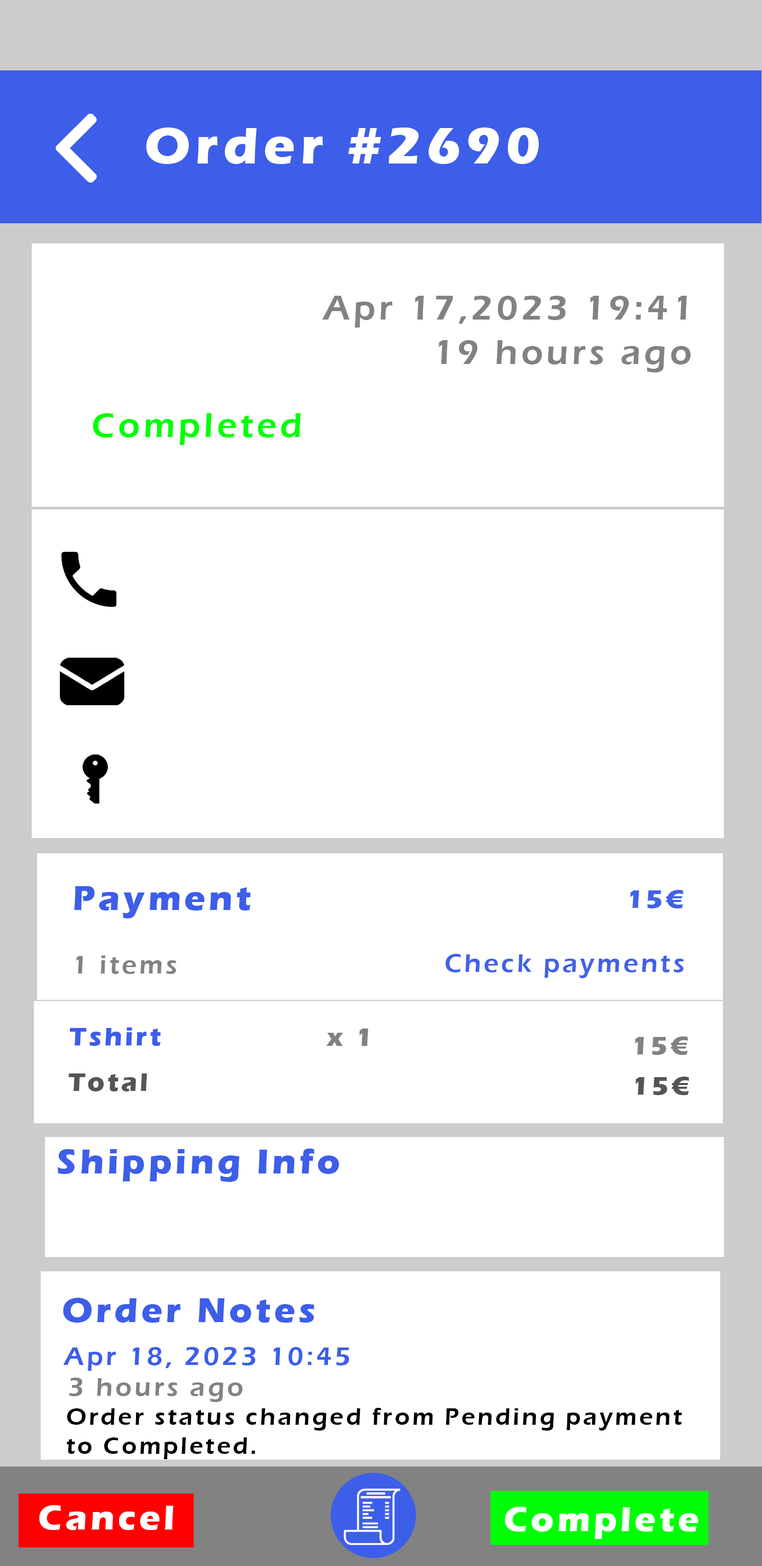
<style>
.page{position:relative;width:762px;height:1566px;background:#ffffff}
.page>*{position:absolute;margin:0}
.t1{font:52.9px "ErasITC-Bold";letter-spacing:0.1em;color:#ffffff}
.t2{font:35.3px "ErasITC-Demi";letter-spacing:0.1em;color:#828282}
.t3{font:35.3px "ErasITC-Demi";letter-spacing:0.1em;color:#00ff06}
.t4{font:35.3px "ErasITC-Bold";letter-spacing:0.1em;color:#3d5ee9}
.t5{font:26.4px "ErasITC-Bold";letter-spacing:0.1em;color:#4161e9}
.t6{font:26.4px "ErasITC-Demi";letter-spacing:0.1em;color:#4161e9}
.t7{font:26.4px "ErasITC-Demi";letter-spacing:0.1em;color:#828282}
.t8{font:26.4px "ErasITC-Bold";letter-spacing:0.1em;color:#3d5ee9}
.t9{font:26.4px "ErasITC-Bold";letter-spacing:0.1em;color:#828282}
.t10{font:26.4px "ErasITC-Bold";letter-spacing:0.1em;color:#555555}
.t11{font:26.4px "ErasITC-Demi";letter-spacing:0.1em;color:#3d5ee9}
.t12{font:24.2px "ErasITC-Demi";letter-spacing:0.1em;color:#000000}
.t13{font:35.3px "ErasITC-Bold";letter-spacing:0.1em;color:#ffffff}
</style>
<div class="page">
<p class="t1" style="left:146px;top:127px;width:392px;height:37px">Order #2690</p>
<p class="t2" style="left:322px;top:296px;width:365px;height:31px">Apr 17,2023 19:41</p>
<p class="t2" style="left:438px;top:340px;width:252px;height:32px">19 hours ago</p>
<p class="t3" style="left:93px;top:413px;width:208px;height:32px">Completed</p>
<p class="t4" style="left:74px;top:886px;width:177px;height:32px">Payment</p>
<p class="t5" style="left:630px;top:890px;width:53px;height:18px">15€</p>
<p class="t6" style="left:445px;top:954px;width:238px;height:24px">Check payments</p>
<p class="t7" style="left:76px;top:955px;width:100px;height:19px">1 items</p>
<p class="t8" style="left:69px;top:1027px;width:92px;height:19px">Tshirt</p>
<p class="t9" style="left:326px;top:1028px;width:42px;height:18px">x 1</p>
<p class="t9" style="left:635px;top:1036px;width:53px;height:19px">15€</p>
<p class="t10" style="left:68px;top:1073px;width:79px;height:18px">Total</p>
<p class="t10" style="left:635px;top:1076px;width:54px;height:19px">15€</p>
<p class="t4" style="left:57px;top:1148px;width:282px;height:34px">Shipping Info</p>
<p class="t4" style="left:63px;top:1297px;width:251px;height:25px">Order Notes</p>
<p class="t11" style="left:63px;top:1347px;width:286px;height:23px">Apr 18, 2023 10:45</p>
<p class="t7" style="left:69px;top:1377px;width:174px;height:25px">3 hours ago</p>
<p class="t12" style="left:67px;top:1407px;width:615px;height:52px">Order status changed from Pending payment <br>to Completed.</p>
<p class="t13" style="left:39px;top:1505px;width:134px;height:25px">Cancel</p>
<p class="t13" style="left:505px;top:1506px;width:193px;height:33px">Complete</p>
</div>
